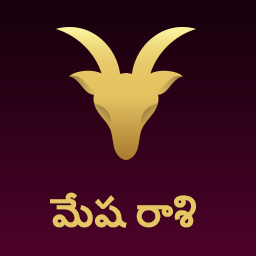
<style>
.page{position:relative;width:256px;height:256px}
.page>*{position:absolute;margin:0}
.t1{font:34.1px "NirmalaUI-Bold";letter-spacing:-0.05em;color:#e6c565;text-transform:uppercase;font-weight:bold}
</style>
<div class="page">
<p class="t1" style="left:50px;top:192px;width:146px;height:36px">మేష రాశి</p>
</div>
